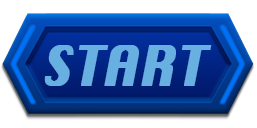
<style>
.page{position:relative;width:257px;height:128px;background:#ffffff}
.page>*{position:absolute;margin:0}
.t1{font:53.5px "Silom";color:#67b0e1;font-weight:bold;font-style:italic}
</style>
<div class="page">
<p class="t1" style="left:44px;top:45px;width:168px;height:41px">START</p>
</div>
